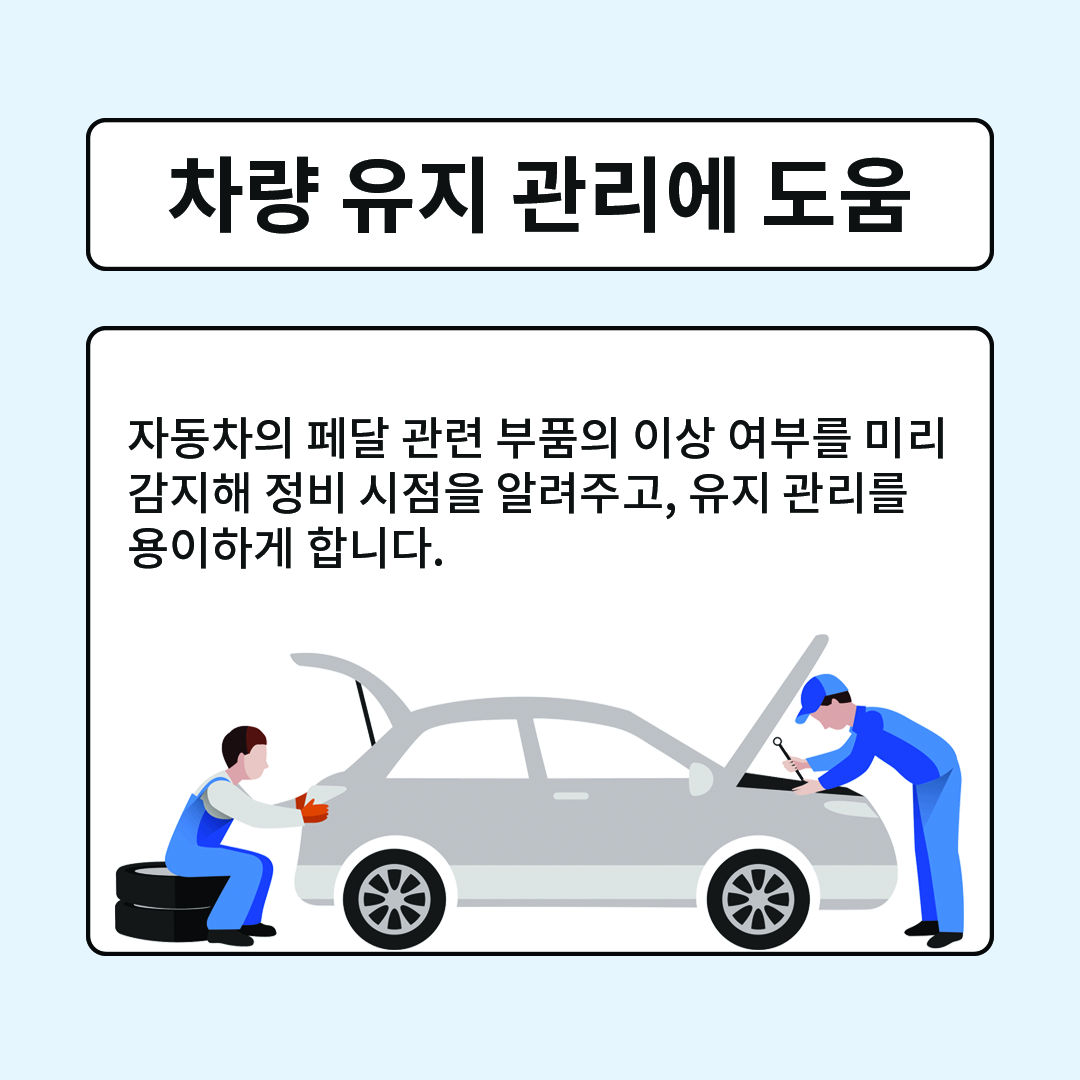
<style>
.page{position:relative;width:1080px;height:1080px;background:#ffffff}
.page>*{position:absolute;margin:0}
.t1{font:83.3px "NotoSansCJKkr-Bold";color:#0e1112}
.t2{font:45.8px "NotoSansCJKkr-Medium";color:#0e1112}
</style>
<div class="page">
<p class="t1" style="left:168px;top:156px;width:742px;height:78px">차량 유지 관리에 도움</p>
<p class="t2" style="left:128px;top:417px;width:815px;height:152px">자동차의 페달 관련 부품의 이상 여부를 미리 <br>감지해 정비 시점을 알려주고, 유지 관리를 <br>용이하게 합니다.</p>
</div>
